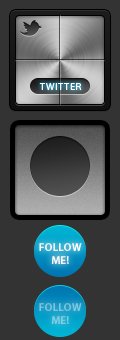
<style>
.page{position:relative;width:120px;height:340px;background:#333333}
.page>*{position:absolute;margin:0}
.t1{font:10px "MyriadPro-Regular";letter-spacing:0.075em;color:#ffffff}
.t2{font:11px "MyriadPro-Semibold";letter-spacing:0.025em;color:#ffffff}
.t3{font:11px "MyriadPro-Semibold";letter-spacing:0.025em;color:#7fc7df}
</style>
<div class="page">
<p class="t1" style="left:39px;top:83px;width:43px;height:7px">TWITTER</p>
<p class="t2" style="left:39px;top:243px;width:43px;height:21px;text-align:center">FOLLOW<br>ME!</p>
<p class="t3" style="left:39px;top:303px;width:43px;height:21px;text-align:center">FOLLOW<br>ME!</p>
</div>
